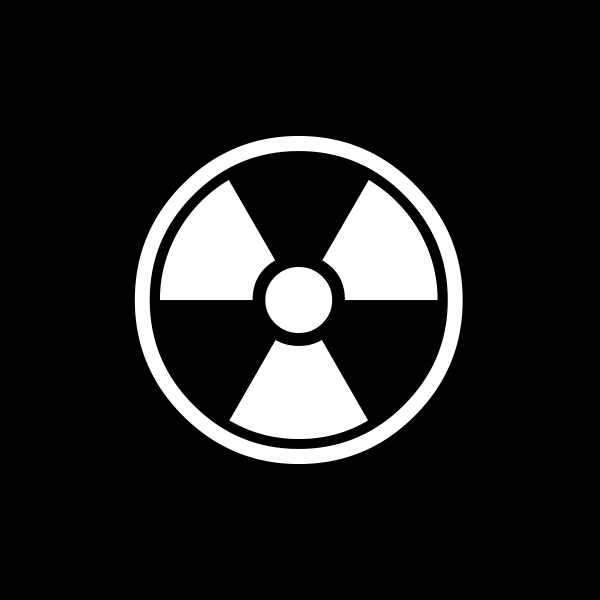
<style>
.page{position:relative;width:600px;height:600px;background:#000000}
.page>*{position:absolute;margin:0}
.t1{font:514.1px "ArialUnicodeMS";color:#ffffff}
</style>
<div class="page">
<p class="t1" style="left:134px;top:136px;width:329px;height:328px">☢</p>
</div>
